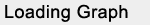
<style>
.page{position:relative;width:150px;height:25px;background:#eeeeee}
.page>*{position:absolute;margin:0}
.t1{font:18px "ArialMT";letter-spacing:0.025em;color:#000000}
</style>
<div class="page">
<p class="t1" style="left:5px;top:4px;width:123px;height:18px">Loading Graph</p>
</div>
